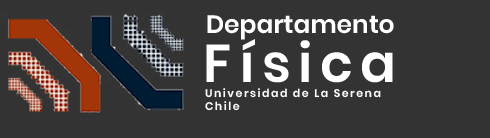
<style>
.page{position:relative;width:490px;height:138px;background:#333333}
.page>*{position:absolute;margin:0}
.t1{font:25px "Poppins-SemiBold";color:#ffffff}
.t2{font:53px "Poppins-SemiBold";letter-spacing:0.14em;color:#ffffff}
.t3{font:11px "Poppins-SemiBold";letter-spacing:0.14em;color:#ffffff}
</style>
<div class="page">
<p class="t1" style="left:207px;top:15px;width:187px;height:25px">Departamento</p>
<p class="t2" style="left:206px;top:39px;width:187px;height:44px">Física</p>
<p class="t3" style="left:205px;top:88px;width:176px;height:23px">Universidad de La Serena<br>Chile</p>
</div>
